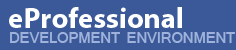
<style>
.page{position:relative;width:236px;height:50px;background:#3b5998}
.page>*{position:absolute;margin:0}
.t1{font:29.1px "MyriadPro-Bold";color:#ffffff}
.t2{font:21.6px "Gautami";color:#9eb2db}
</style>
<div class="page">
<p class="t1" style="left:9px;top:7px;width:173px;height:21px">eProfessional</p>
<p class="t2" style="left:10px;top:32px;width:225px;height:11px">DEVELOPMENT ENVIRONMENT</p>
</div>
